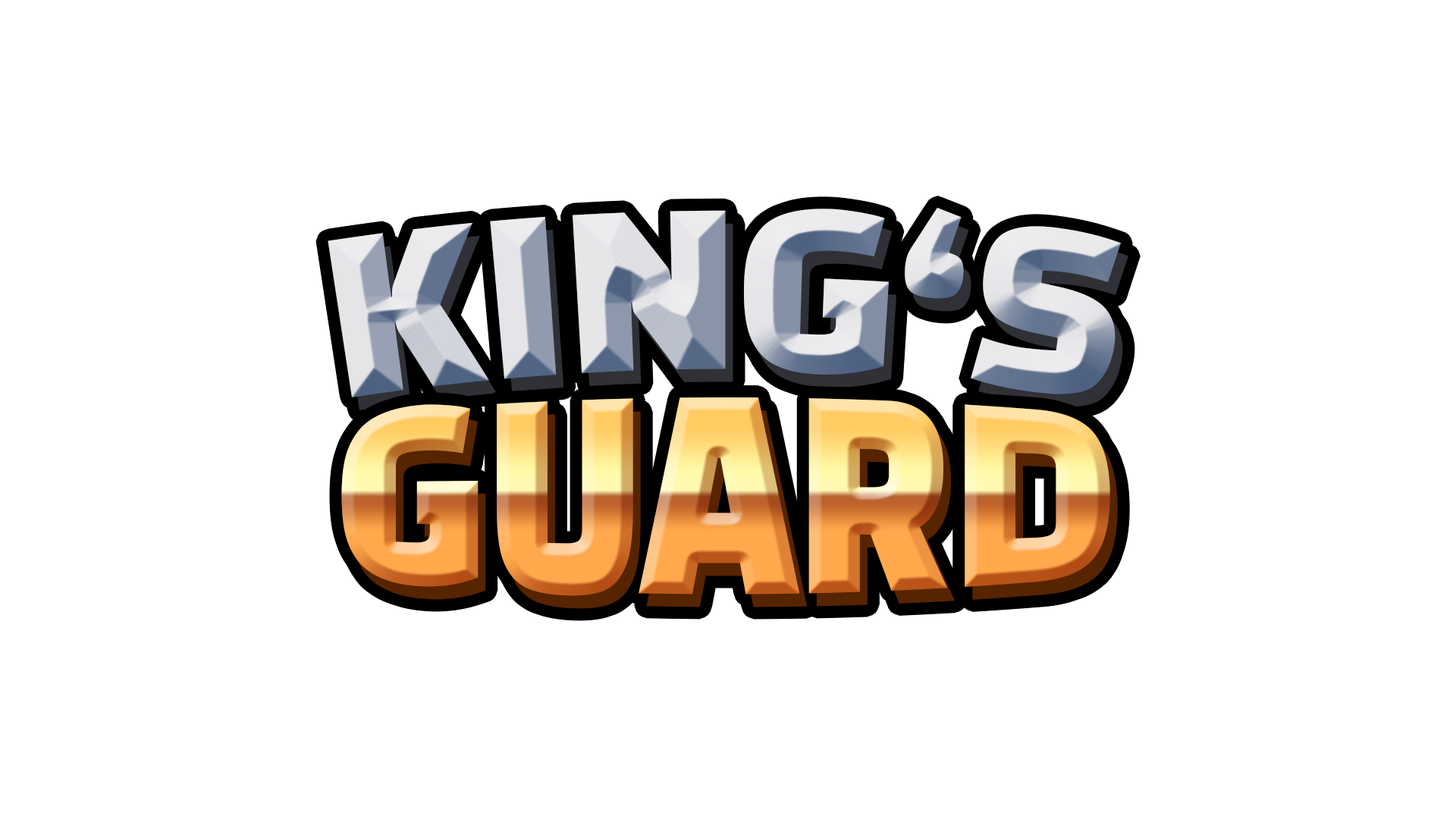
<style>
.page{position:relative;width:1456px;height:819px;background:#ffffff}
.page>*{position:absolute;margin:0}
.t1{font:253px "ChangaOne"}
</style>
<div class="page">
<p class="t1" style="left:328px;top:208px;width:793px;height:189px">KING‘S</p>
<p class="t1" style="left:341px;top:397px;width:769px;height:199px">GUARD</p>
</div>
